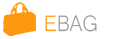
<style>
.page{position:relative;width:139px;height:39px;background:#ffffff}
.page>*{position:absolute;margin:0}
.t1{font:28.8px "Microsoft-Yi-Baiti";color:#999999;scale:0.88 1}
.t2{font:28.8px "Microsoft-Yi-Baiti";color:#fe980f;scale:0.88 1}
</style>
<div class="page">
<p class="t1" style="left:45px;top:15px;width:52px;height:17px"><span class="t2">E</span>BAG</p>
</div>
